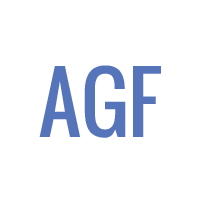
<style>
.page{position:relative;width:200px;height:200px;background:#ffffff}
.page>*{position:absolute;margin:0}
.t1{font:81px "Oswald-Regular";color:#5674b9}
</style>
<div class="page">
<p class="t1" style="left:39px;top:65px;width:122px;height:73px">AGF</p>
</div>
